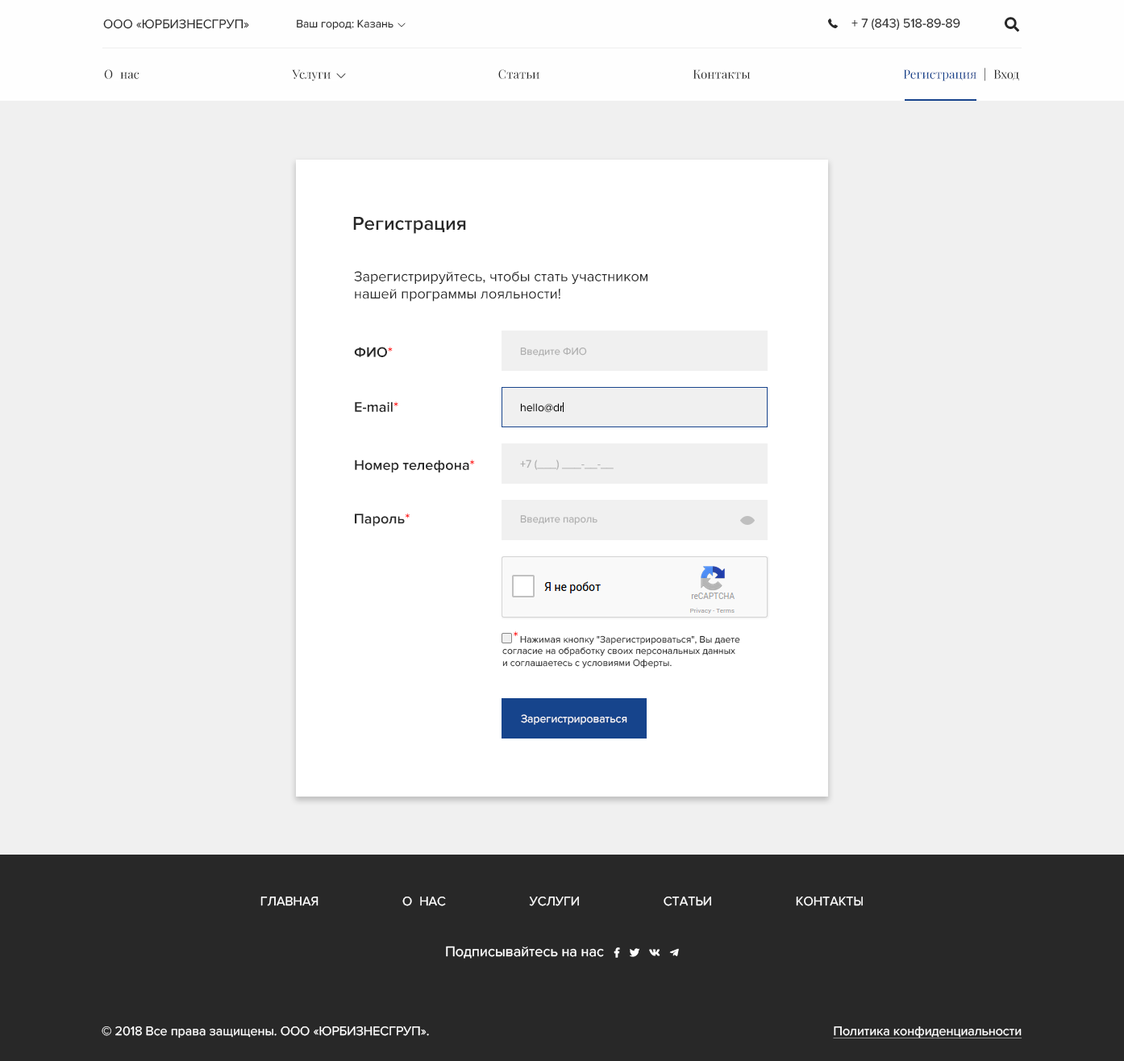
<style>
.page{position:relative;width:1124px;height:1061px;background:#f0f0f0}
.page>*{position:absolute;margin:0}
.t1{font:12.9px "ProximaNova-Regular";color:#282828}
.t2{font:11.3px "ProximaNova-Regular";color:#282828}
.t3{font:12.9px "ProximaNova-Regular";color:#282828;text-transform:uppercase}
.t4{font:12.1px "PlayfairDisplay-Regular";color:#282828}
.t5{font:12.1px "PlayfairDisplay-Regular";color:#ffffff}
.t6{font:12.1px "PlayfairDisplay-Regular";color:#17438c}
.t7{font:12.1px "PlayfairDisplay-Regular";color:#fefefe}
.t8{font:19.3px "ProximaNova-Semibold";color:#282828}
.t9{font:14.5px "ProximaNova-Regular";color:#282828}
.t10{font:14.5px "ProximaNova-Semibold";color:#282828}
.t11{font:14.5px "ProximaNova-Semibold";color:#ff0000}
.t12{font:10.5px "ProximaNova-Regular";color:#adadad}
.t13{font:11.3px "ProximaNova-Regular";color:#000000}
.t14{font:11.3px "ProximaNova-Regular";color:#adadad}
.t15{font:9.7px "ProximaNova-Regular";color:#282828}
.t16{font:11.3px "ProximaNova-Regular";color:#fefefe}
.t17{font:12.9px "ProximaNova-Regular";color:#ffffff;text-transform:uppercase}
.t18{font:12.9px "ProximaNova-Regular";color:#ffffff}
.t19{font:12.9px "ProximaNova-Regular";color:#ffffff;text-decoration:underline}
</style>
<div class="page">
<p class="t1" style="left:103px;top:19px;width:146px;height:10px">ООО «ЮРБИЗНЕСГРУП»</p>
<p class="t2" style="left:297px;top:19px;width:96px;height:11px">Ваш город: Казань</p>
<p class="t3" style="left:851px;top:19px;width:109px;height:12px">+ 7 (843) 518-89-89</p>
<p class="t4" style="left:104px;top:68px;width:915px;height:13px">О<span class="t5">_</span>нас Услуги<span class="t5">__</span> Статьи Контакты <span class="t6">Регистрация</span><span class="t7">_</span>|<span class="t7">_</span>Вход</p>
<p class="t8" style="left:353px;top:217px;width:113px;height:17px">Регистрация</p>
<p class="t9" style="left:354px;top:271px;width:293px;height:31px">Зарегистрируйтесь, чтобы стать участником<br>нашей программы лояльности!</p>
<p class="t10" style="left:354px;top:347px;width:39px;height:10px">ФИО<span class="t11">*</span></p>
<p class="t12" style="left:520px;top:347px;width:67px;height:9px">Введите ФИО</p>
<p class="t10" style="left:355px;top:402px;width:43px;height:10px">E-mail<span class="t11">*</span></p>
<p class="t13" style="left:520px;top:403px;width:44px;height:10px">hello@dr</p>
<p class="t10" style="left:355px;top:460px;width:120px;height:12px">Номер телефона<span class="t11">*</span></p>
<p class="t14" style="left:520px;top:460px;width:94px;height:10px">+7 (___) ___-__-__</p>
<p class="t10" style="left:355px;top:514px;width:55px;height:12px">Пароль<span class="t11">*</span></p>
<p class="t12" style="left:520px;top:515px;width:77px;height:10px">Введите пароль</p>
<p class="t15" style="left:502px;top:635px;width:238px;height:33px">Нажимая кнопку "Зарегистрироваться", Вы даете согласие на обработку своих персональных данных<br>и соглашаетесь с условиями Оферты.</p>
<p class="t11" style="left:514px;top:631px;width:4px;height:5px">*</p>
<p class="t16" style="left:521px;top:714px;width:106px;height:11px">Зарегистрироваться</p>
<p class="t17" style="left:260px;top:897px;width:603px;height:10px">Главная О<span class="t3">_</span>нас Услуги Статьи КОнтакты</p>
<p class="t18" style="left:102px;top:1026px;width:327px;height:12px">© 2018 Все права защищены. ООО «ЮРБИЗНЕСГРУП».</p>
<p class="t19" style="left:833px;top:1026px;width:189px;height:12px">Политика конфиденциальности</p>
</div>
